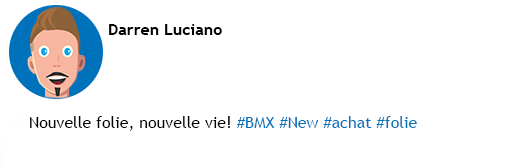
<style>
.page{position:relative;width:512px;height:166px;background:#ffffff}
.page>*{position:absolute;margin:0}
.t1{font:16px "TrebuchetMS-Bold";color:#000000}
.t2{font:16px "TrebuchetMS";color:#000000}
.t3{font:16px "TrebuchetMS";color:#0072bc}
</style>
<div class="page">
<p class="t1" style="left:109px;top:24px;width:113px;height:11px">Darren Luciano</p>
<p class="t2" style="left:30px;top:116px;width:387px;height:15px">Nouvelle folie, nouvelle vie! <span class="t3">#BMX #New #achat #folie</span></p>
</div>
